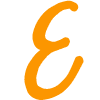
<style>
.page{position:relative;width:100px;height:100px;background:#ffffff}
.page>*{position:absolute;margin:0}
.t1{font:83px "MASexy";color:#fc9600}
</style>
<div class="page">
<p class="t1" style="left:27px;top:3px;width:54px;height:94px">E</p>
</div>
